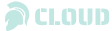
<style>
.page{position:relative;width:112px;height:31px;background:#ffffff}
.page>*{position:absolute;margin:0}
.t1{font:24px "SairaStencilOne-Regular";color:#c1e7e3;text-transform:uppercase}
</style>
<div class="page">
<p class="t1" style="left:35px;top:8px;width:75px;height:18px">CLOUD</p>
</div>
